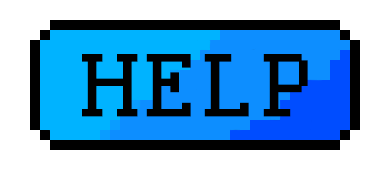
<style>
.page{position:relative;width:390px;height:170px;background:#ffffff}
.page>*{position:absolute;margin:0}
.t1{font:97.5px "Courier";letter-spacing:0.06em;color:#000000;font-weight:bold;scale:0.96 1}
</style>
<div class="page">
<p class="t1" style="left:82px;top:54px;width:226px;height:63px">HELP</p>
</div>
